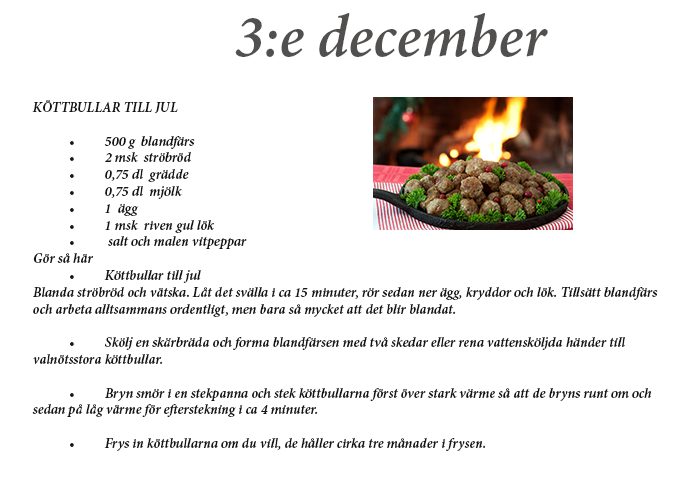
<style>
.page{position:relative;width:700px;height:500px;background:#ffffff}
.page>*{position:absolute;margin:0}
.t1{font:60px "MinionPro-SemiboldIt";color:#524f4f}
.t2{font:14px "MinionPro-SemiboldIt";color:#171616}
</style>
<div class="page">
<p class="t1" style="left:235px;top:13px;width:313px;height:44px">3:e december</p>
<p class="t2" style="left:32px;top:100px;width:626px;height:351px">KÖTTBULLAR TILL JUL<br><br> • 500 g  blandfärs<br> • 2 msk  ströbröd<br> • 0,75 dl  grädde<br> • 0,75 dl  mjölk<br> • 1  ägg<br> • 1 msk  riven gul lök<br> •  salt och malen vitpeppar<br>Gör så här<br> • Köttbullar till jul<br>Blanda ströbröd och vätska. Låt det svälla i ca 15 minuter, rör sedan ner ägg, kryddor och lök. Tillsätt blandfärs och arbeta alltsammans ordentligt, men bara så mycket att det blir blandat. <br><br> • Skölj en skärbräda och forma blandfärsen med två skedar eller rena vattensköljda händer till valnötsstora köttbullar. <br><br> • Bryn smör i en stekpanna och stek köttbullarna först över stark värme så att de bryns runt om och sedan på låg värme för efterstekning i ca 4 minuter. <br><br> • Frys in köttbullarna om du vill, de håller cirka tre månader i frysen.</p>
</div>
